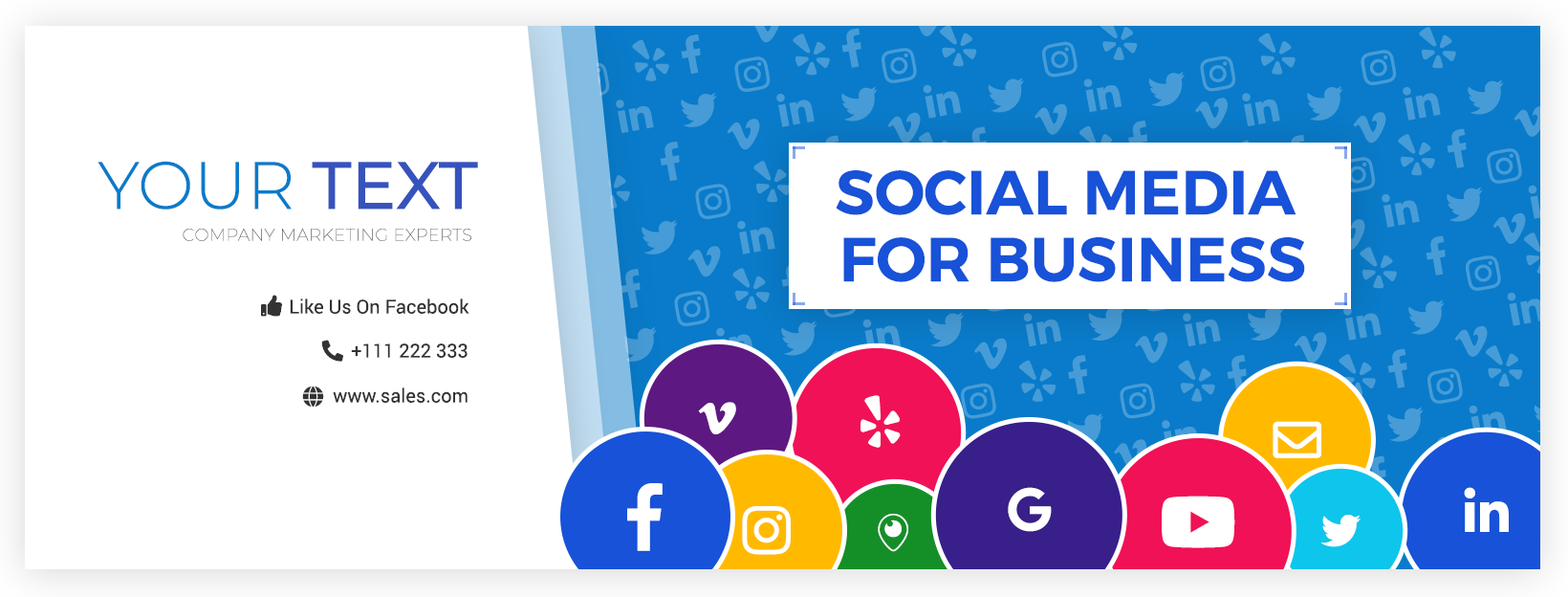
<style>
.page{position:relative;width:1568px;height:597px;background:#ffffff}
.page>*{position:absolute;margin:0}
.t1{font:66.9px "Montserrat-Light";color:#097bca;text-transform:uppercase}
.t2{font:66.9px "Montserrat-Medium";color:#3653bd;text-transform:uppercase}
.t3{font:62.1px/66.9px "Montserrat-SemiBold";color:#1752d8;text-transform:uppercase}
.t4{font:17.2px "Montserrat-Thin";letter-spacing:0.02em;color:#585858;text-transform:uppercase}
.t5{font:19.1px "Roboto-Regular";color:#333333}
.t6{font:19.1px "Roboto-Regular";color:#333333;text-transform:uppercase}
</style>
<div class="page">
<p class="t1" style="left:98px;top:161px;width:380px;height:48px">your <span class="t2">text</span></p>
<p class="t3" style="left:836px;top:170px;width:469px;height:112px;text-align:center">SoCIAL MEDIA <br>FOR BUSINESS</p>
<p class="t4" style="left:183px;top:229px;width:288px;height:12px">company marketing experts</p>
<p class="t5" style="left:290px;top:298px;width:179px;height:16px">Like Us On Facebook</p>
<p class="t6" style="left:351px;top:343px;width:117px;height:15px">+111 222 333</p>
<p class="t5" style="left:333px;top:387px;width:135px;height:16px">www.sales.com</p>
</div>
